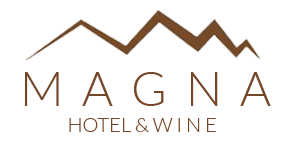
<style>
.page{position:relative;width:288px;height:164px;background:#ffffff}
.page>*{position:absolute;margin:0}
.t1{font:48px "Lato-Light";color:#754628}
.t2{font:20px "Lato-Light";color:#754628}
</style>
<div class="page">
<p class="t1" style="left:25px;top:72px;width:246px;height:34px">M  A  G  N  A</p>
<p class="t2" style="left:69px;top:118px;width:147px;height:14px">HOTEL &amp; W I N E</p>
</div>
